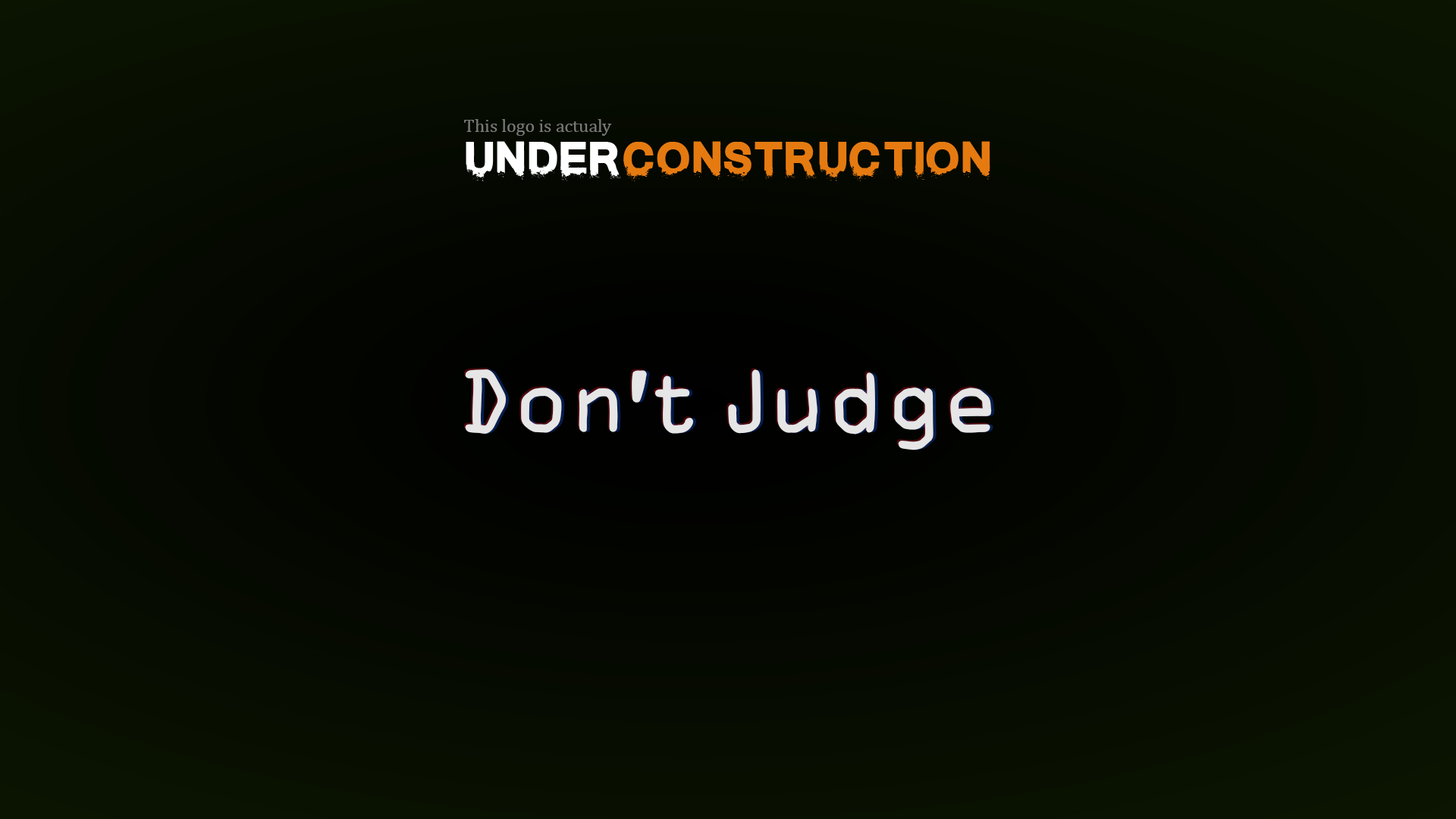
<style>
.page{position:relative;width:1456px;height:819px}
.page>*{position:absolute;margin:0}
.t1{font:18.2px "Cambria";color:#777875}
.t2{font:91px "MKOCR";letter-spacing:0.05em;color:#e6e6e6}
</style>
<div class="page">
<p class="t1" style="left:464px;top:119px;width:148px;height:17px">This logo is actualy</p>
<p class="t2" style="left:463px;top:368px;width:527px;height:81px">Don't Judge</p>
<p class="t2" style="left:465px;top:369px;width:527px;height:81px">Don't Judge</p>
<p class="t2" style="left:468px;top:369px;width:527px;height:81px">Don't Judge</p>
</div>
